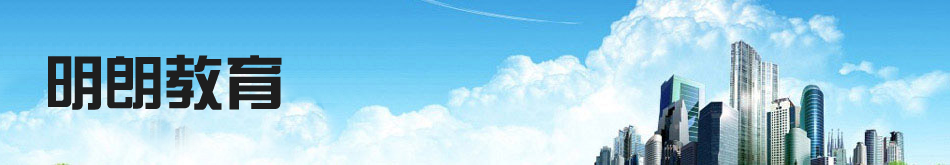
<style>
.page{position:relative;width:950px;height:165px}
.page>*{position:absolute;margin:0}
.t1{font:60px "FZZYJW--GB1-0";color:#1e1e1e}
</style>
<div class="page">
<p class="t1" style="left:48px;top:54px;width:234px;height:56px">明朗教育</p>
</div>
